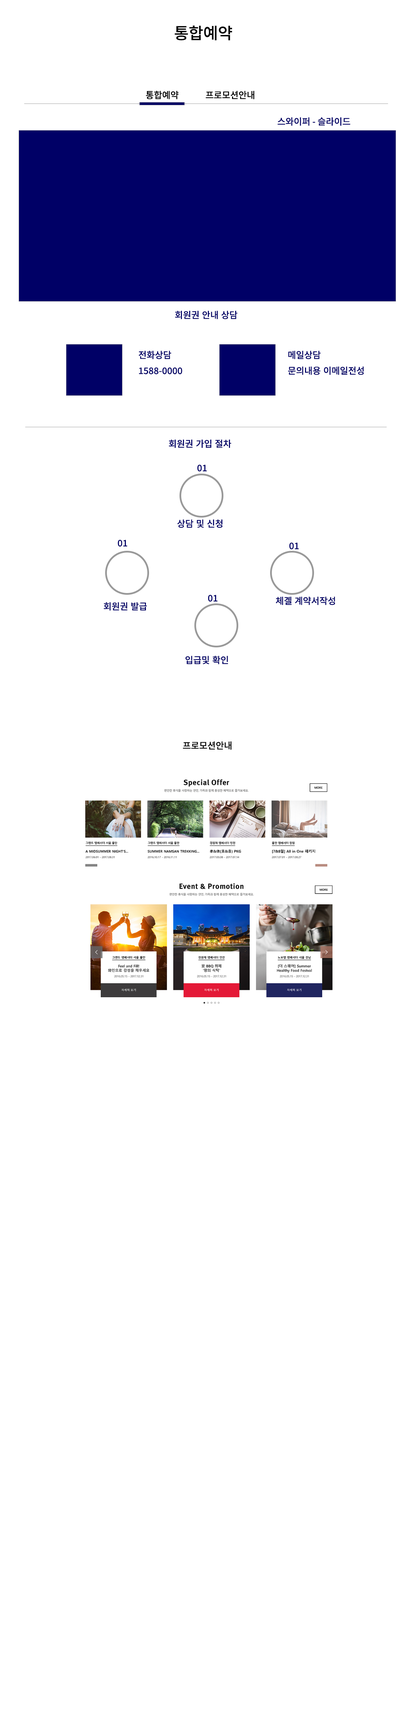
<style>
.page{position:relative;width:415px;height:1731px;background:#ffffff}
.page>*{position:absolute;margin:0}
.t1{font:15.9px "NotoSansKR-Medium";color:#000000}
.t2{font:9px "NotoSansKR-Medium";color:#000000}
.t3{font:9px "NotoSansKR-Medium";color:#000066}
</style>
<div class="page">
<p class="t1" style="left:175px;top:25px;width:57px;height:15px">통합예약</p>
<p class="t2" style="left:146px;top:91px;width:33px;height:8px">통합예약</p>
<p class="t2" style="left:206px;top:91px;width:49px;height:8px">프로모션안내</p>
<p class="t3" style="left:278px;top:117px;width:73px;height:9px">스와이퍼 - 슬라이드</p>
<p class="t3" style="left:175px;top:310px;width:63px;height:9px">회원권 안내 상담</p>
<p class="t3" style="left:139px;top:351px;width:43px;height:23px">전화상담<br>1588-0000</p>
<p class="t3" style="left:288px;top:351px;width:76px;height:24px">메일상담<br>문의내용 이메일전성</p>
<p class="t3" style="left:169px;top:439px;width:63px;height:9px">회원권 가입 절차</p>
<p class="t3" style="left:197px;top:465px;width:10px;height:6px">01</p>
<p class="t3" style="left:177px;top:519px;width:46px;height:9px">상담 및 신청</p>
<p class="t3" style="left:118px;top:540px;width:9px;height:7px">01</p>
<p class="t3" style="left:289px;top:542px;width:10px;height:7px">01</p>
<p class="t3" style="left:104px;top:602px;width:43px;height:9px">회원권 발급</p>
<p class="t3" style="left:208px;top:595px;width:10px;height:7px">01</p>
<p class="t3" style="left:276px;top:596px;width:59px;height:9px">체곌 계약서작성</p>
<p class="t3" style="left:186px;top:656px;width:42px;height:8px">입급및 확인</p>
<p class="t2" style="left:183px;top:741px;width:49px;height:9px">프로모션안내</p>
</div>
